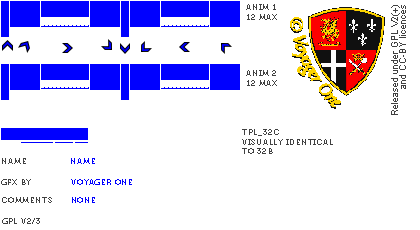
<style>
.page{position:relative;width:420px;height:230px;background:#ffffff}
.page>*{position:absolute;margin:0}
.t1{font:8px "Museo700-Regular";letter-spacing:0.075em;color:#404040;text-transform:uppercase}
.t2{font:8px "Museo700-Regular";letter-spacing:0.075em;color:#0000ff;text-transform:uppercase}
</style>
<div class="page">
<p class="t1" style="left:246px;top:4px;width:31px;height:16px">anim 1<br>12 max</p>
<p class="t1" style="left:246px;top:70px;width:31px;height:16px">anim 2<br>12 max</p>
<p class="t1" style="left:242px;top:129px;width:91px;height:25px">tpl_32c<br>visually identical<br>to 32b</p>
<p class="t1" style="left:2px;top:158px;width:24px;height:6px">name</p>
<p class="t2" style="left:71px;top:158px;width:24px;height:6px">name</p>
<p class="t1" style="left:1px;top:179px;width:30px;height:6px">gfx by</p>
<p class="t2" style="left:71px;top:179px;width:61px;height:6px">voyager one</p>
<p class="t1" style="left:2px;top:197px;width:50px;height:6px">comments</p>
<p class="t2" style="left:72px;top:197px;width:23px;height:6px">none</p>
<p class="t1" style="left:2px;top:218px;width:38px;height:6px">gpl v2/3</p>
</div>
